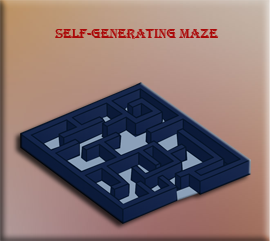
<style>
.page{position:relative;width:270px;height:241px}
.page>*{position:absolute;margin:0}
.t1{font:13.9px "Algerian";color:#ab0909}
</style>
<div class="page">
<p class="t1" style="left:55px;top:29px;width:164px;height:10px">Self-Generating Maze</p>
</div>
